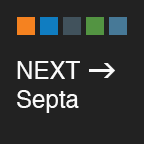
<style>
.page{position:relative;width:144px;height:144px;background:#222222}
.page>*{position:absolute;margin:0}
.t1{font:24px "Helvetica";color:#fafafa}
.t2{font:36px "Wingdings3";color:#fafafa}
</style>
<div class="page">
<p class="t1" style="left:17px;top:61px;width:98px;height:52px">NEXT <span class="t2">g<br></span>Septa</p>
</div>
